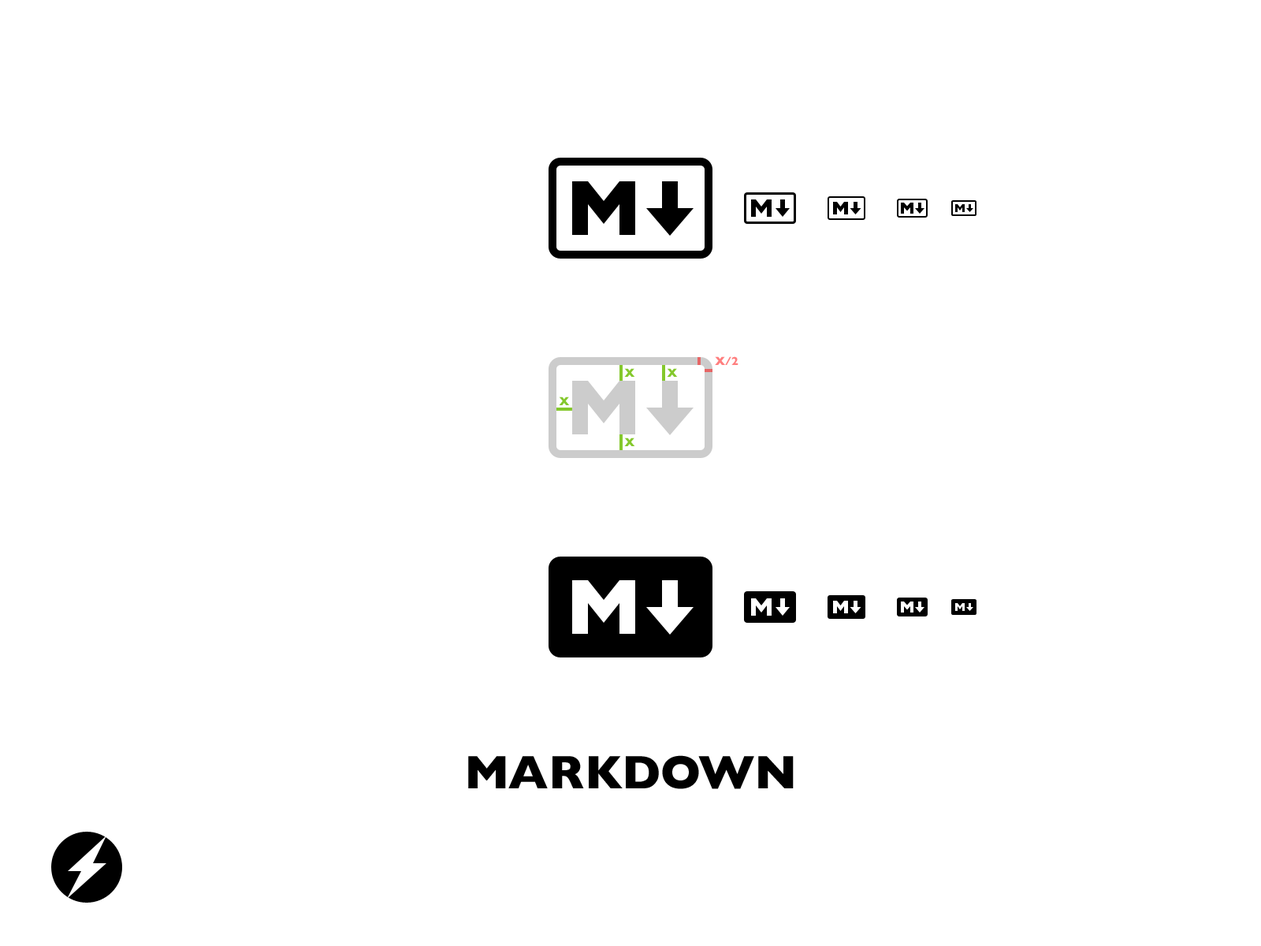
<style>
.page{position:relative;width:1261px;height:946px;background:#ffffff}
.page>*{position:absolute;margin:0}
.t1{font:11.8px "GillSans-Bold";color:#ff7f7f}
.t2{font:11.8px "GillSans-Bold";color:#84c82c}
.t3{font:47.3px "GillSans-Bold";color:#000000}
</style>
<div class="page">
<p class="t1" style="left:715px;top:356px;width:23px;height:9px">X/2</p>
<p class="t2" style="left:624px;top:368px;width:11px;height:9px">X</p>
<p class="t2" style="left:667px;top:368px;width:11px;height:9px">X</p>
<p class="t2" style="left:559px;top:396px;width:11px;height:9px">X</p>
<p class="t2" style="left:624px;top:437px;width:11px;height:9px">X</p>
<p class="t3" style="left:468px;top:755px;width:326px;height:34px">MARKDOWN</p>
</div>
